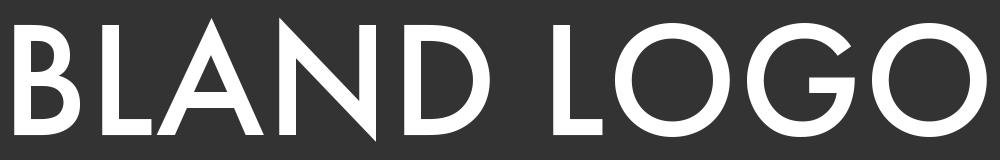
<style>
.page{position:relative;width:1000px;height:160px;background:#333333}
.page>*{position:absolute;margin:0}
.t1{font:165.4px "FuturaPT-Medium";letter-spacing:0.01em;color:#ffffff}
</style>
<div class="page">
<p class="t1" style="left:14px;top:17px;width:973px;height:125px">BLAND LOGO</p>
</div>
